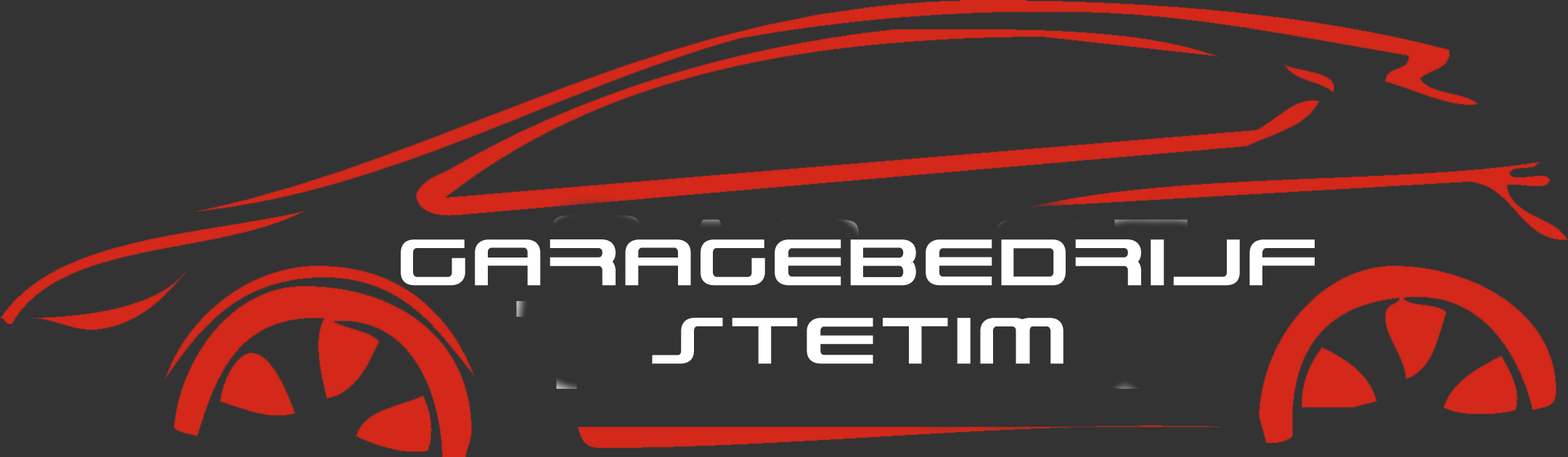
<style>
.page{position:relative;width:1568px;height:457px;background:#333333}
.page>*{position:absolute;margin:0}
.t1{font:65.3px "PhatBoySlim-Bold";color:#ffffff}
</style>
<div class="page">
<p class="t1" style="left:401px;top:240px;width:914px;height:124px;text-align:center">GARAGEBEDRIJF<br>STETIM</p>
</div>
